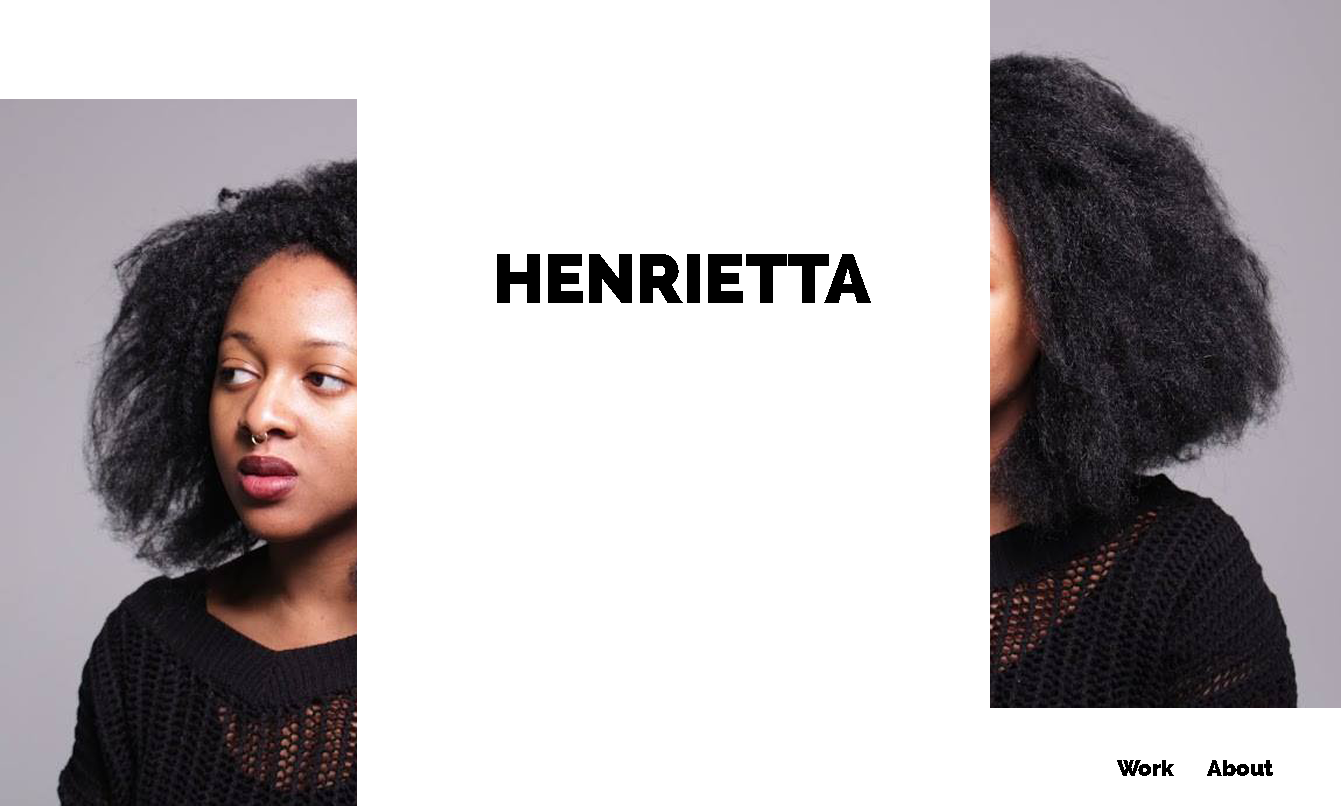
<style>
.page{position:relative;width:1341px;height:806px;background:#ffffff}
.page>*{position:absolute;margin:0}
.t1{font:68px "Raleway-Heavy";color:#000000}
.t2{font:22px "Raleway-Heavy";color:#000000}
</style>
<div class="page">
<p class="t1" style="left:497px;top:254px;width:374px;height:49px">HENRIETTA</p>
<p class="t2" style="left:1117px;top:760px;width:57px;height:16px">Work</p>
<p class="t2" style="left:1207px;top:760px;width:66px;height:16px">About</p>
</div>
